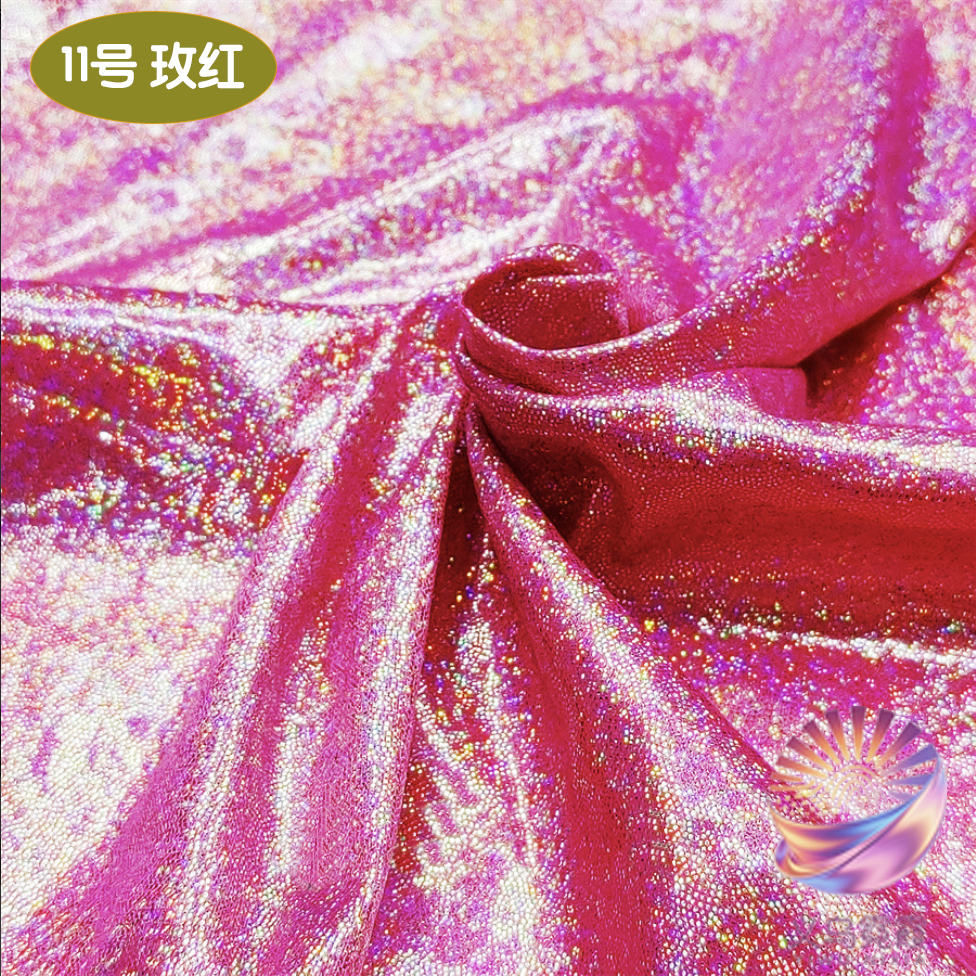
<style>
.page{position:relative;width:976px;height:976px}
.page>*{position:absolute;margin:0}
.t1{font:49.1px "STYuanti-SC-Bold";color:#ffffff;scale:0.97 1}
.t2{font:84.6px "STBaoliSC-Regular";color:#ffffff;scale:0.97 1}
</style>
<div class="page">
<p class="t1" style="left:61px;top:41px;width:184px;height:49px"><span class="t2">         </span>11号 玫红</p>
</div>
